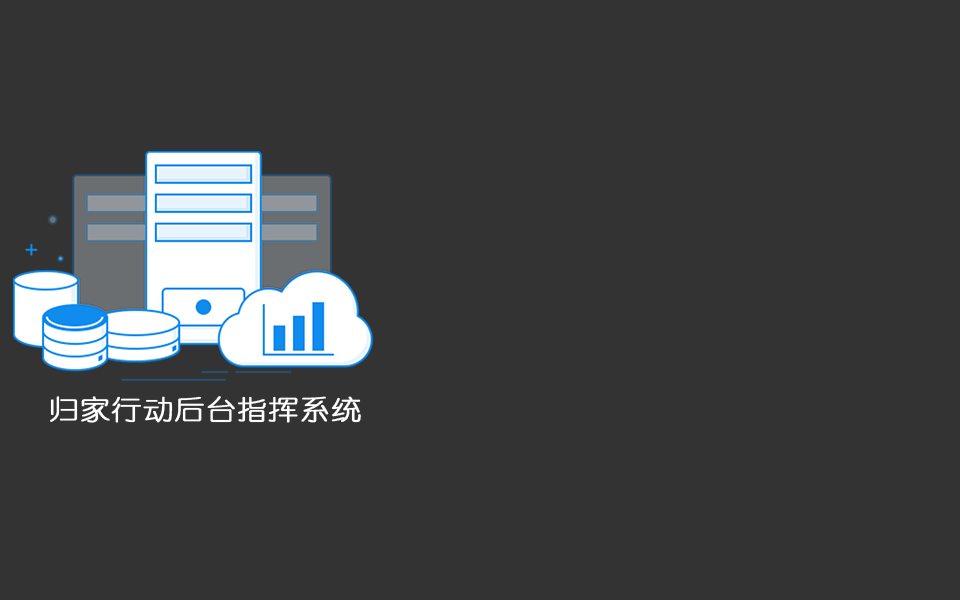
<style>
.page{position:relative;width:960px;height:600px;background:#333333}
.page>*{position:absolute;margin:0}
.t1{font:27px "YouYuan";letter-spacing:0.02em;color:#ffffff;font-weight:bold;scale:1.11 1}
</style>
<div class="page">
<p class="t1" style="left:50px;top:396px;width:311px;height:27px">归家行动后台指挥系统</p>
</div>
